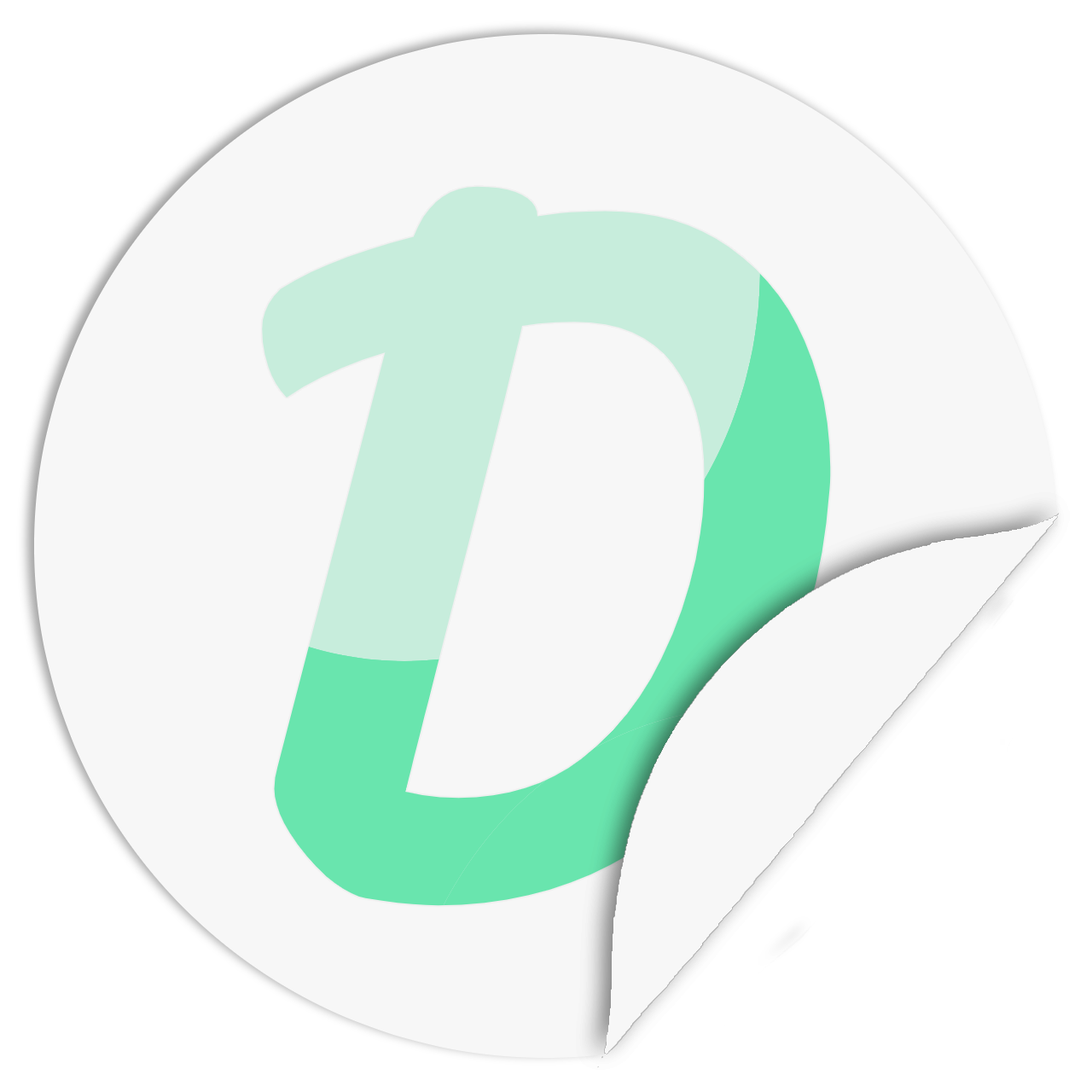
<style>
.page{position:relative;width:1092px;height:1092px;background:#f7f7f7}
.page>*{position:absolute;margin:0}
.t1{font:1023.7px "Sriracha-Regular"}
</style>
<div class="page">
<p class="t1" style="left:262px;top:186px;width:569px;height:720px">D</p>
</div>
